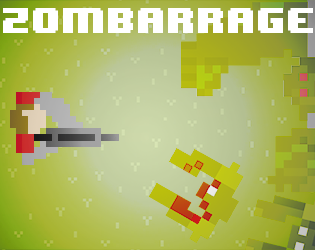
<style>
.page{position:relative;width:315px;height:250px}
.page>*{position:absolute;margin:0}
.t1{font:30px "8BITWONDERNominal";color:#ffffff}
</style>
<div class="page">
<p class="t1" style="left:3px;top:8px;width:310px;height:25px">ZOMBARRAGE</p>
</div>
